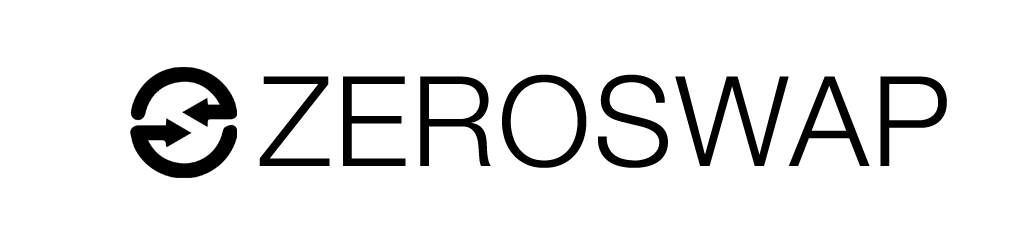
<style>
.page{position:relative;width:1024px;height:234px;background:#ffffff}
.page>*{position:absolute;margin:0}
.t1{font:125px "HelveticaNeue-Light";letter-spacing:0.025em;color:#000000}
</style>
<div class="page">
<p class="t1" style="left:259px;top:74px;width:688px;height:94px">ZEROSWAP</p>
</div>
